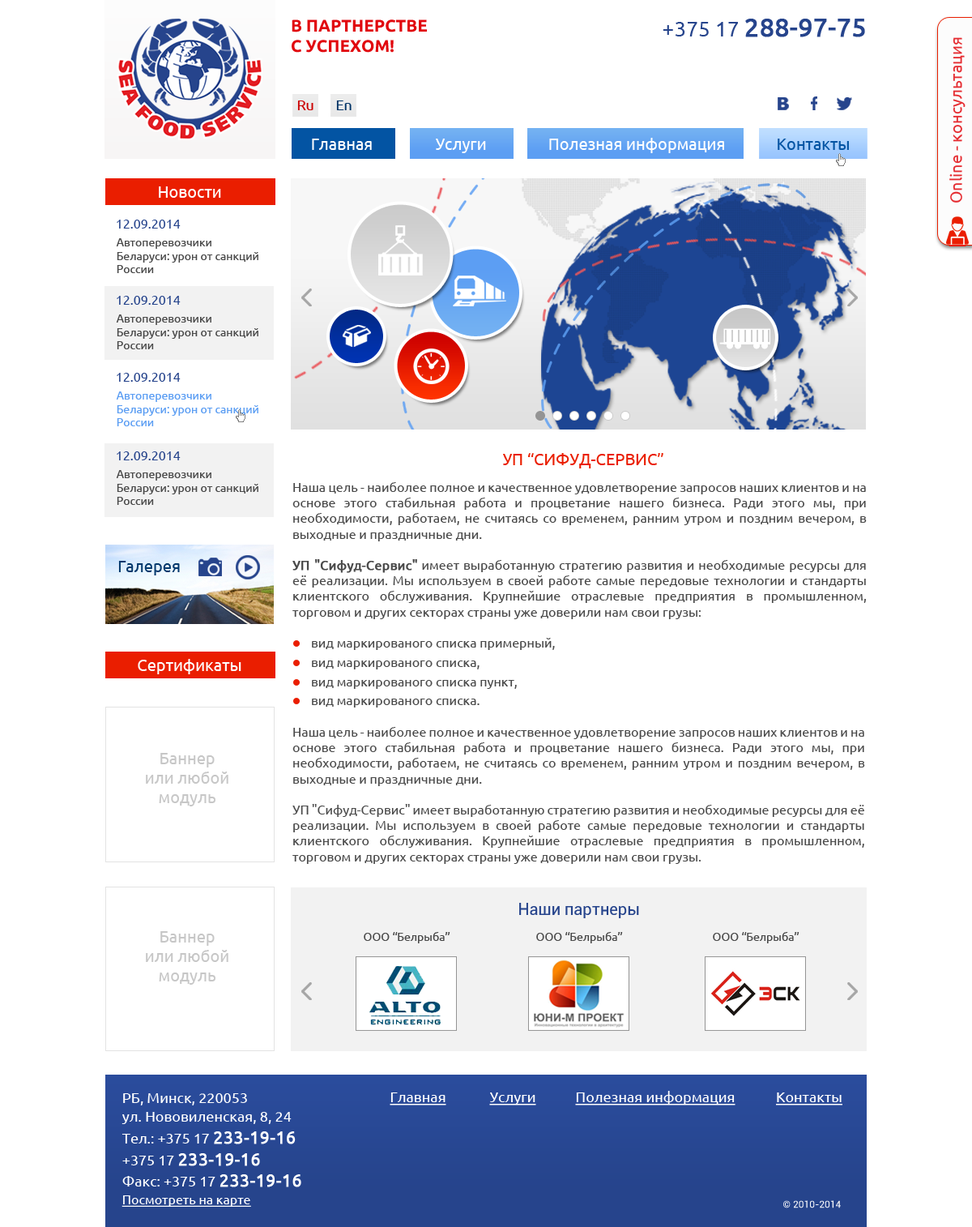
<style>
.page{position:relative;width:972px;height:1227px;background:#ffffff}
.page>*{position:absolute;margin:0}
.t1{font:16.8px "Ubuntu-Bold";color:#e1080e;text-transform:uppercase}
.t2{font:25.5px "Ubuntu";color:#26448c;font-weight:bold}
.t3{font:21.3px "Ubuntu";color:#26448c}
.t4{font:16.2px "Ubuntu";color:#e52b30}
.t5{font:14.2px "Ubuntu";color:#cc0000}
.t6{font:14.2px "Ubuntu";color:#003366}
.t7{font:16.2px "Ubuntu";color:#ffffff}
.t8{font:16.2px "Ubuntu";color:#0354a3}
.t9{font:13px "Ubuntu";color:#26448c}
.t10{font:11.3px "Ubuntu";color:#4a4a4a}
.t11{font:11.3px "Ubuntu";color:#5c9ef3}
.t12{font:16.2px "Ubuntu";color:#ea1e00}
.t13{font:13px "Ubuntu";color:#494949}
.t14{font:13px "Ubuntu";color:#494949;font-weight:bold}
.t15{font:16.2px "Ubuntu";color:#03386c}
.t16{font:13px "Ubuntu";color:#4a4a4a}
.t17{font:16.2px "Ubuntu";color:#c7c7c7}
.t18{font:16.2px "Roboto-Regular";color:#26448c}
.t19{font:14.6px "Ubuntu";color:#ffffff}
.t20{font:14.6px "Ubuntu";color:#ffffff;text-decoration:underline}
.t21{font:14.4px "Ubuntu";color:#ffffff}
.t22{font:17.3px "Ubuntu";color:#ffffff;font-weight:bold}
.t23{font:13px "Ubuntu";color:#ffffff;text-decoration:underline}
.t24{font:9.7px "Roboto-Regular";color:#ffffff}
</style>
<div class="page">
<p class="t1" style="left:292px;top:19px;width:135px;height:34px">В партнерстве<br>с успехом!</p>
<p class="t2" style="left:663px;top:19px;width:202px;height:18px"><span class="t3">+375 17 </span>288-97-75</p>
<p class="t4" style="left:949px;top:37px;width:17px;height:166px;rotate:-90deg">Online - консультация</p>
<p class="t5" style="left:297px;top:100px;width:17px;height:10px">Ru</p>
<p class="t6" style="left:336px;top:100px;width:16px;height:10px">En</p>
<p class="t7" style="left:549px;top:138px;width:175px;height:15px">Полезная информация</p>
<p class="t7" style="left:312px;top:139px;width:60px;height:11px">Главная</p>
<p class="t7" style="left:436px;top:139px;width:50px;height:14px">Услуги</p>
<p class="t8" style="left:778px;top:139px;width:71px;height:11px">Контакты</p>
<p class="t7" style="left:159px;top:186px;width:62px;height:12px">Новости</p>
<p class="t9" style="left:117px;top:220px;width:64px;height:8px">12.09.2014</p>
<p class="t10" style="left:116px;top:238px;width:142px;height:35px">Автоперевозчики Беларуси: урон от санкций России</p>
<p class="t9" style="left:117px;top:296px;width:64px;height:9px">12.09.2014</p>
<p class="t10" style="left:116px;top:314px;width:142px;height:35px">Автоперевозчики Беларуси: урон от санкций России</p>
<p class="t9" style="left:117px;top:373px;width:64px;height:9px">12.09.2014</p>
<p class="t11" style="left:116px;top:391px;width:142px;height:35px">Автоперевозчики Беларуси: урон от санкций России</p>
<p class="t9" style="left:117px;top:451px;width:64px;height:9px">12.09.2014</p>
<p class="t12" style="left:503px;top:453px;width:161px;height:15px">УП “СИФУД-СЕРВИС”</p>
<p class="t10" style="left:116px;top:470px;width:142px;height:35px">Автоперевозчики Беларуси: урон от санкций России</p>
<p class="t13" style="left:292px;top:482px;width:575px;height:137px;text-align:justify">Наша цель - наиболее полное и качественное удовлетворение запросов наших клиентов и на основе этого стабильная работа и процветание нашего бизнеса. Ради этого мы, при необходимости, работаем, не считаясь со временем, ранним утром и поздним вечером, в выходные и праздничные дни.<br><br><span class="t14">УП "Сифуд-Сервис"</span> имеет выработанную стратегию развития и необходимые ресурсы для её реализации. Мы используем в своей работе самые передовые технологии и стандарты клиентского обслуживания. Крупнейшие отраслевые предприятия в промышленном, торговом и других секторах страны уже доверили нам свои грузы:</p>
<p class="t15" style="left:118px;top:561px;width:62px;height:14px">Галерея</p>
<p class="t16" style="left:312px;top:638px;width:243px;height:12px">вид маркированого списка примерный,</p>
<p class="t7" style="left:138px;top:659px;width:103px;height:15px">Сертификаты</p>
<p class="t16" style="left:312px;top:660px;width:168px;height:9px">вид маркированого списка,</p>
<p class="t16" style="left:312px;top:680px;width:205px;height:9px">вид маркированого списка пункт,</p>
<p class="t16" style="left:312px;top:698px;width:168px;height:9px">вид маркированого списка.</p>
<p class="t16" style="left:292px;top:727px;width:573px;height:137px;text-align:justify">Наша цель - наиболее полное и качественное удовлетворение запросов наших клиентов и на основе этого стабильная работа и процветание нашего бизнеса. Ради этого мы, при необходимости, работаем, не считаясь со временем, ранним утром и поздним вечером, в выходные и праздничные дни.<br><br>УП "Сифуд-Сервис" имеет выработанную стратегию развития и необходимые ресурсы для её реализации. Мы используем в своей работе самые передовые технологии и стандарты клиентского обслуживания. Крупнейшие отраслевые предприятия в промышленном, торговом и других секторах страны уже доверили нам свои грузы.</p>
<p class="t17" style="left:146px;top:753px;width:82px;height:53px;text-align:center">Баннер<br>или любой<br>модуль</p>
<p class="t18" style="left:519px;top:903px;width:120px;height:15px">Наши партнеры</p>
<p class="t17" style="left:146px;top:931px;width:82px;height:53px;text-align:center">Баннер<br>или любой<br>модуль</p>
<p class="t10" style="left:364px;top:932px;width:86px;height:11px">ООО “Белрыба”</p>
<p class="t10" style="left:536px;top:932px;width:87px;height:11px">ООО “Белрыба”</p>
<p class="t10" style="left:713px;top:932px;width:87px;height:11px">ООО “Белрыба”</p>
<p class="t19" style="left:123px;top:1093px;width:124px;height:12px">РБ, Минск, 220053</p>
<p class="t20" style="left:390px;top:1092px;width:56px;height:13px">Главная</p>
<p class="t20" style="left:489px;top:1092px;width:47px;height:13px">Услуги</p>
<p class="t20" style="left:575px;top:1090px;width:161px;height:15px">Полезная информация</p>
<p class="t20" style="left:776px;top:1092px;width:67px;height:13px">Контакты</p>
<p class="t19" style="left:122px;top:1112px;width:170px;height:12px">ул. Нововиленская, 8, 24</p>
<p class="t21" style="left:122px;top:1131px;width:174px;height:13px">Тел.: +375 17 <span class="t22">233-19-16</span></p>
<p class="t22" style="left:122px;top:1153px;width:138px;height:13px"><span class="t21">+375 17 </span>233-19-16</p>
<p class="t21" style="left:122px;top:1174px;width:179px;height:13px">Факс: +375 17 <span class="t22">233-19-16</span></p>
<p class="t23" style="left:122px;top:1195px;width:129px;height:11px">Посмотреть на карте</p>
<p class="t24" style="left:783px;top:1200px;width:58px;height:8px">© 2010-2014</p>
</div>
